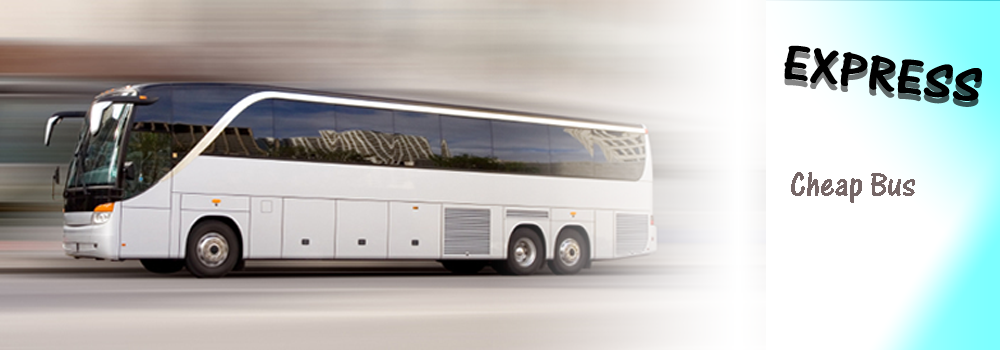
<style>
.page{position:relative;width:1000px;height:350px}
.page>*{position:absolute;margin:0}
.t1{font:51.3px "OneStrokeScriptLetPlain";color:#000000;scale:1.19 1}
.t2{font:51.3px "OneStrokeScriptLetPlain";scale:1.19 1}
.t3{font:36px "OneStrokeScriptLetPlain";color:#766767}
</style>
<div class="page">
<p class="t1" style="left:784px;top:45px;width:198px;height:56px;rotate:7deg">EXPRESS</p>
<p class="t2" style="left:784px;top:51px;width:198px;height:56px;rotate:7deg">EXPRESS</p>
<p class="t3" style="left:791px;top:172px;width:124px;height:31px">Cheap Bus</p>
</div>
